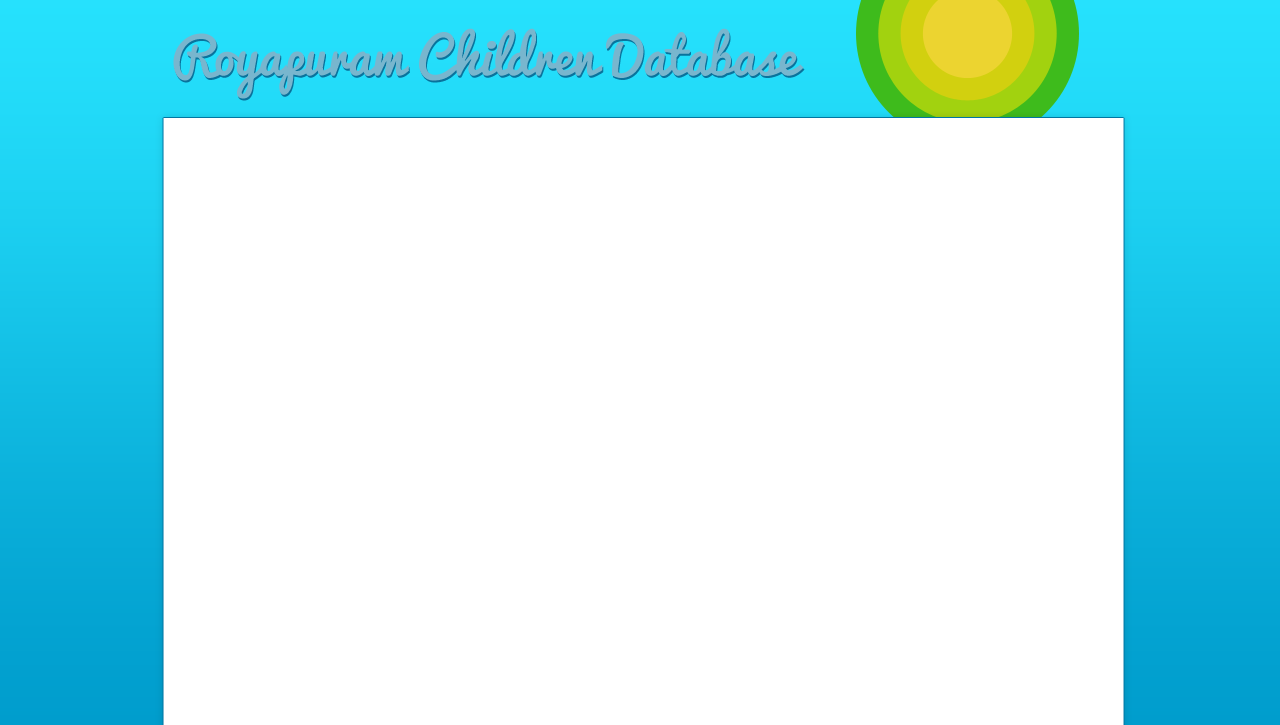
<style>
.page{position:relative;width:1280px;height:725px;background:#ffffff}
.page>*{position:absolute;margin:0}
.t1{font:50px "Pacifico";color:#78b6ce}
</style>
<div class="page">
<p class="t1" style="left:173px;top:28px;width:631px;height:71px">Royapuram Children Database</p>
</div>
